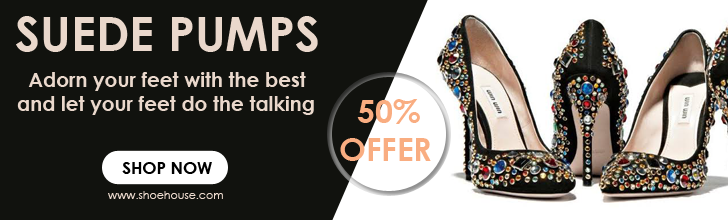
<style>
.page{position:relative;width:728px;height:220px;background:#11120e}
.page>*{position:absolute;margin:0}
.t1{font:48px "CenturyGothic-Bold";color:#ead8cc}
.t2{font:20px "CenturyGothic-Bold";color:#ead8cc}
.t3{font:32px "CenturyGothic-Bold";color:#f9ad81}
.t4{font:16.8px "CenturyGothic-Bold";color:#000000}
.t5{font:11px "CenturyGothic";color:#ead8cc}
</style>
<div class="page">
<p class="t1" style="left:16px;top:16px;width:302px;height:36px">SUEDE PUMPS</p>
<p class="t2" style="left:17px;top:72px;width:297px;height:43px">Adorn your feet with the best and let your feet do the talking</p>
<p class="t3" style="left:340px;top:99px;width:91px;height:62px">50%<br>OFFER</p>
<p class="t4" style="left:122px;top:162px;width:90px;height:12px">SHOP NOW</p>
<p class="t5" style="left:108px;top:191px;width:115px;height:8px">www.shoehouse.com</p>
</div>
